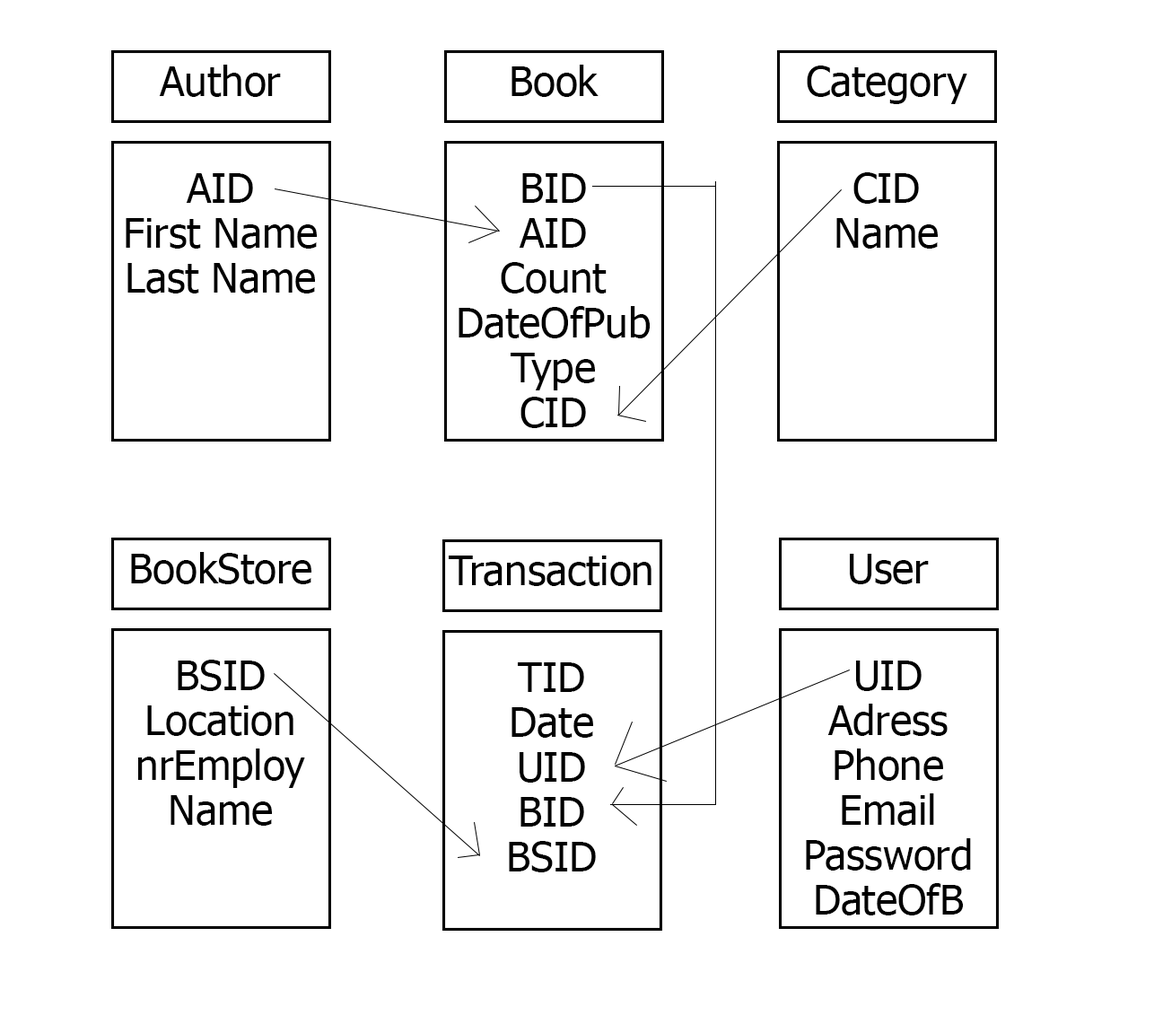
<style>
.page{position:relative;width:1154px;height:1033px;background:#ffffff}
.page>*{position:absolute;margin:0}
.t1{font:41.3px "Tahoma";color:#000000}
</style>
<div class="page">
<p class="t1" style="left:159px;top:65px;width:122px;height:32px">Author</p>
<p class="t1" style="left:512px;top:65px;width:87px;height:32px">Book</p>
<p class="t1" style="left:807px;top:66px;width:161px;height:38px">Category</p>
<p class="t1" style="left:186px;top:173px;width:67px;height:30px">AID</p>
<p class="t1" style="left:522px;top:173px;width:64px;height:30px">BID</p>
<p class="t1" style="left:854px;top:172px;width:65px;height:32px">CID</p>
<p class="t1" style="left:126px;top:218px;width:191px;height:31px">First Name</p>
<p class="t1" style="left:519px;top:218px;width:67px;height:30px">AID</p>
<p class="t1" style="left:837px;top:218px;width:101px;height:31px">Name</p>
<p class="t1" style="left:127px;top:263px;width:188px;height:30px">Last Name</p>
<p class="t1" style="left:501px;top:262px;width:106px;height:31px">Count</p>
<p class="t1" style="left:459px;top:306px;width:192px;height:32px">DateOfPub</p>
<p class="t1" style="left:511px;top:353px;width:84px;height:37px">Type</p>
<p class="t1" style="left:521px;top:397px;width:65px;height:31px">CID</p>
<p class="t1" style="left:131px;top:552px;width:180px;height:32px">BookStore</p>
<p class="t1" style="left:449px;top:556px;width:203px;height:30px">Transaction</p>
<p class="t1" style="left:850px;top:554px;width:79px;height:30px">User</p>
<p class="t1" style="left:178px;top:660px;width:87px;height:31px">BSID</p>
<p class="t1" style="left:518px;top:662px;width:66px;height:30px">TID</p>
<p class="t1" style="left:856px;top:661px;width:66px;height:30px">UID</p>
<p class="t1" style="left:147px;top:705px;width:146px;height:31px">Location</p>
<p class="t1" style="left:512px;top:707px;width:81px;height:31px">Date</p>
<p class="t1" style="left:828px;top:704px;width:120px;height:32px">Adress</p>
<p class="t1" style="left:138px;top:749px;width:167px;height:39px">nrEmploy</p>
<p class="t1" style="left:835px;top:749px;width:108px;height:32px">Phone</p>
<p class="t1" style="left:520px;top:752px;width:65px;height:31px">UID</p>
<p class="t1" style="left:171px;top:795px;width:101px;height:31px">Name</p>
<p class="t1" style="left:521px;top:797px;width:63px;height:30px">BID</p>
<p class="t1" style="left:842px;top:793px;width:92px;height:33px">Email</p>
<p class="t1" style="left:509px;top:841px;width:87px;height:31px">BSID</p>
<p class="t1" style="left:806px;top:838px;width:165px;height:33px">Password</p>
<p class="t1" style="left:816px;top:883px;width:147px;height:33px">DateOfB</p>
</div>
